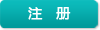
<style>
.page{position:relative;width:100px;height:30px}
.page>*{position:absolute;margin:0}
.t1{font:14px "MicrosoftYaHei";color:#ffffff;font-weight:bold}
</style>
<div class="page">
<p class="t1" style="left:28px;top:7px;width:43px;height:13px">注   册</p>
</div>
